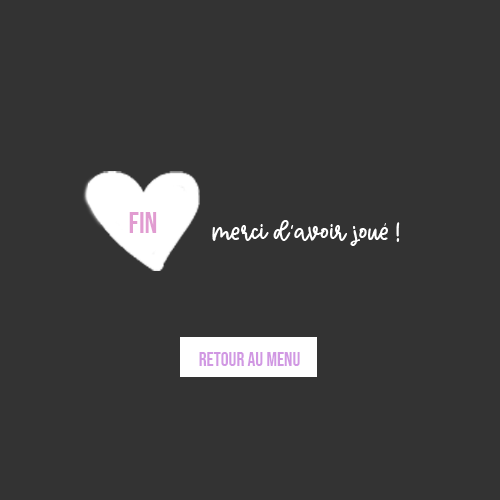
<style>
.page{position:relative;width:500px;height:500px;background:#333333}
.page>*{position:absolute;margin:0}
.t1{font:30px "BebasNeue-Regular";color:#e19cd1}
.t2{font:30px "SparklingDemo";color:#ffffff}
.t3{font:19.6px "BebasNeue-Regular";color:#d198e3}
</style>
<div class="page">
<p class="t1" style="left:129px;top:212px;width:28px;height:21px">fin</p>
<p class="t2" style="left:212px;top:220px;width:188px;height:26px">merci d’avoir joué !</p>
<p class="t3" style="left:199px;top:352px;width:101px;height:14px">retour au menu</p>
</div>
